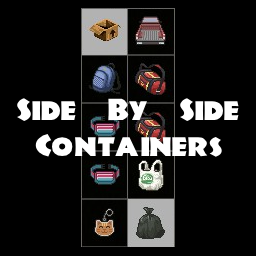
<style>
.page{position:relative;width:256px;height:256px;background:#000000}
.page>*{position:absolute;margin:0}
.t1{font:30px "JungleFever";color:#ffffff}
</style>
<div class="page">
<p class="t1" style="left:17px;top:98px;width:222px;height:59px;text-align:center">Side   By   Side<br>Containers</p>
</div>
